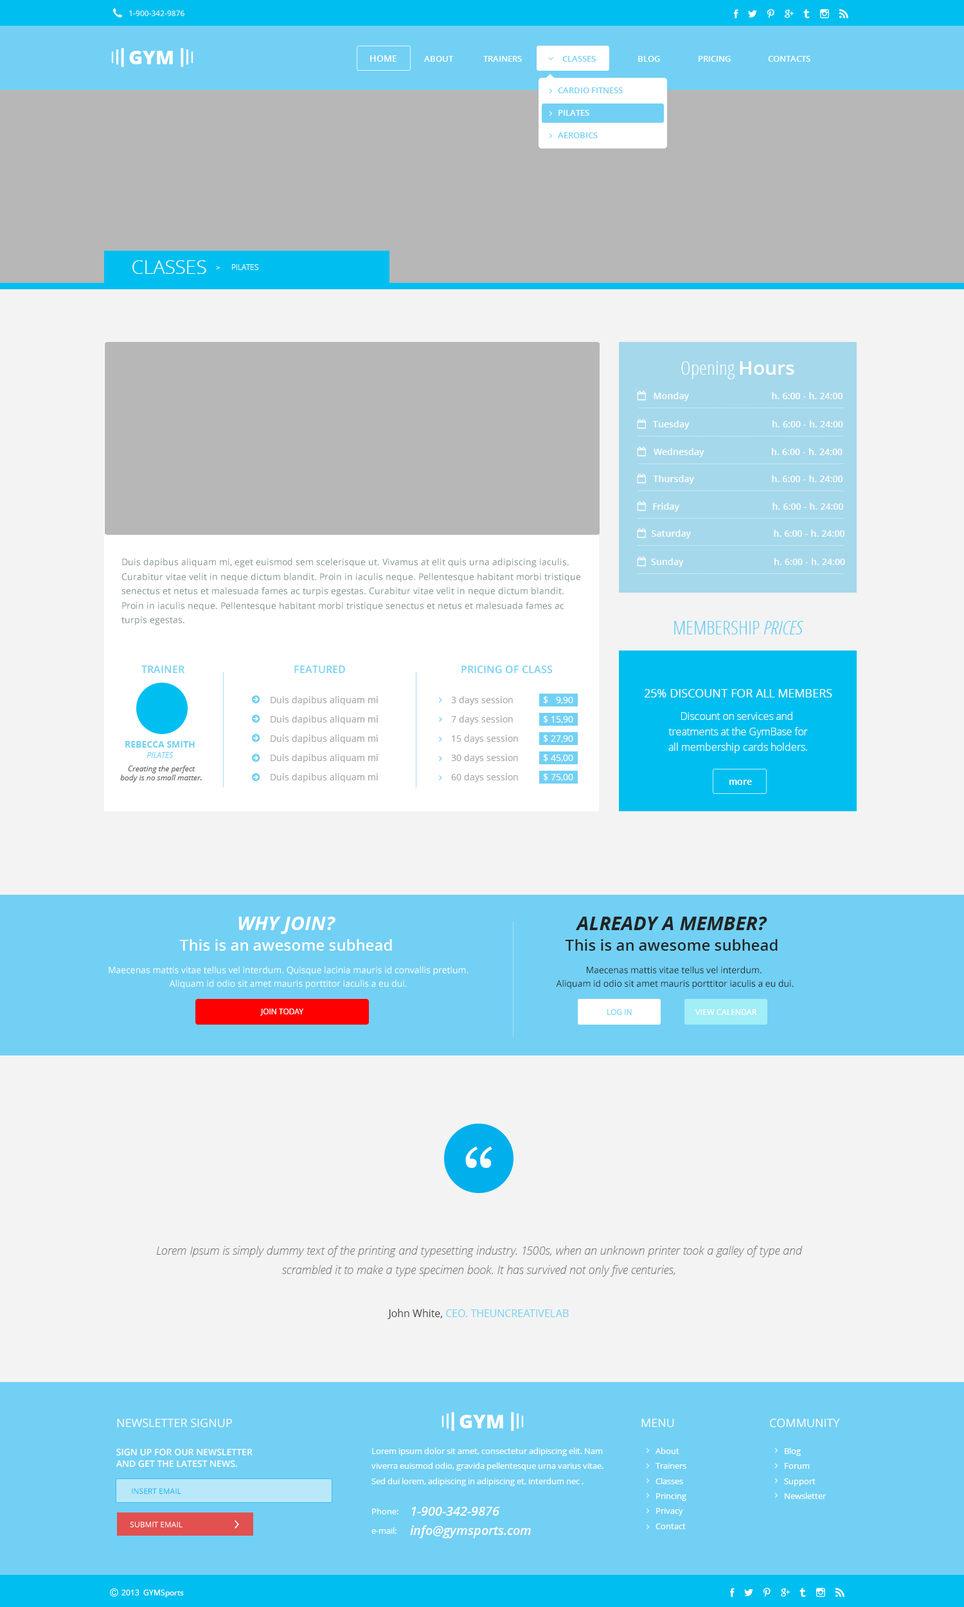
<style>
.page{position:relative;width:964px;height:1607px;background:#f3f3f3}
.page>*{position:absolute;margin:0}
.t1{font:7.7px "OpenSans";color:#ffffff;text-transform:uppercase}
.t2{font:9px "OpenSans-Semibold";color:#ffffff}
.t3{font:8.4px "OpenSans-Semibold";color:#ffffff}
.t4{font:8.4px "OpenSans-Semibold";color:#72d0f4}
.t5{font:19.3px "OpenSans-Light";color:#feffff}
.t6{font:7.1px "OpenSans-Light"}
.t7{font:7.7px "OpenSans-Light";color:#ffffff}
.t8{font:19.3px "OpenSans-CondensedLight";color:#ffffff}
.t9{font:19.3px "OpenSans-Semibold";color:#ffffff}
.t10{font:9px/14.4px "OpenSans";color:#7f8c8c}
.t11{font:19.3px "OpenSans-CondensedLight";color:#57cbf4;text-transform:uppercase}
.t12{font:19.3px "OpenSans-CondensedLightItalic";color:#57cbf4;text-transform:uppercase}
.t13{font:10.3px "OpenSans-Semibold";color:#72d0f4}
.t14{font:10.3px "OpenSans-Semibold";color:#72d0f4;text-transform:uppercase}
.t15{font:11.6px "OpenSans";color:#ffffff;text-transform:uppercase}
.t16{font:9px/19.3px "OpenSans";color:#a6a6a6}
.t17{font:10.3px/15.4px "OpenSans-Light";color:#ffffff}
.t18{font:9px "OpenSans-Bold";color:#72d0f4;text-transform:uppercase}
.t19{font:7.7px "OpenSans-Italic";color:#72d0f4;text-transform:uppercase}
.t20{font:7.7px "OpenSans-Italic";color:#606060}
.t21{font:19.3px "OpenSans-BoldItalic";color:#ffffff}
.t22{font:19.3px "OpenSans-BoldItalic";color:#222222}
.t23{font:15.4px "OpenSans-Semibold";color:#ffffff}
.t24{font:15.4px "OpenSans-Semibold";color:#222222}
.t25{font:9px/13.5px "OpenSans";color:#ffffff}
.t26{font:9px/13.5px "OpenSans";color:#222222}
.t27{font:7.7px "OpenSans";color:#72d0f4;text-transform:uppercase}
.t28{font:7.7px "OpenSans-Semibold";color:#ffffff;text-transform:uppercase}
.t29{font:80.4px "Georgia";color:#ffffff}
.t30{font:11.6px/19.3px "OpenSansLight-Italic";color:#787c7f}
.t31{font:10.3px "OpenSans";color:#72d0f4}
.t32{font:10.3px "OpenSans";color:#414141}
.t33{font:9px/11.6px "OpenSans-Semibold";color:#ffffff;text-transform:uppercase}
.t34{font:8.4px/15px "OpenSans";color:#ffffff}
.t35{font:7.7px "OpenSans";color:#00afec;text-transform:uppercase}
.t36{font:8.4px "OpenSans";color:#ffffff}
.t37{font:12.9px "OpenSans-SemiboldItalic";color:#ffffff}
.t38{font:7.7px "OpenSans";color:#ffffff}
</style>
<div class="page">
<p class="t1" style="left:129px;top:10px;width:55px;height:6px">1-900-342-9876</p>
<p class="t2" style="left:370px;top:55px;width:27px;height:7px">HOME</p>
<p class="t3" style="left:424px;top:56px;width:30px;height:6px">ABOUT</p>
<p class="t3" style="left:483px;top:56px;width:39px;height:6px">TRAINERS</p>
<p class="t4" style="left:562px;top:56px;width:34px;height:6px">CLASSES</p>
<p class="t3" style="left:638px;top:56px;width:22px;height:6px">BLOG</p>
<p class="t3" style="left:699px;top:56px;width:32px;height:6px">PRICING</p>
<p class="t3" style="left:768px;top:56px;width:43px;height:6px">CONTACTS</p>
<p class="t4" style="left:558px;top:87px;width:65px;height:6px">CARDIO FITNESS</p>
<p class="t3" style="left:559px;top:110px;width:31px;height:6px">PILATES</p>
<p class="t4" style="left:558px;top:132px;width:40px;height:6px">AEROBICS</p>
<p class="t5" style="left:132px;top:260px;width:74px;height:14px">CLASSES</p>
<p class="t6" style="left:216px;top:266px;width:4px;height:3px">&gt;</p>
<p class="t7" style="left:232px;top:264px;width:26px;height:6px">PILATES</p>
<p class="t8" style="left:681px;top:361px;width:114px;height:18px">Opening <span class="t9">Hours</span></p>
<p class="t2" style="left:654px;top:392px;width:189px;height:9px">Monday                                h. 6:00 - h. 24:00</p>
<p class="t2" style="left:653px;top:420px;width:190px;height:9px">Tuesday                                h. 6:00 - h. 24:00</p>
<p class="t2" style="left:654px;top:448px;width:189px;height:9px">Wednesday                          h. 6:00 - h. 24:00</p>
<p class="t2" style="left:653px;top:475px;width:190px;height:9px">Thursday                              h. 6:00 - h. 24:00</p>
<p class="t2" style="left:653px;top:503px;width:190px;height:9px">Friday                                    h. 6:00 - h. 24:00</p>
<p class="t2" style="left:652px;top:530px;width:193px;height:9px">Saturday                                h. 6:00 - h. 24:00</p>
<p class="t10" style="left:122px;top:558px;width:458px;height:68px">Duis dapibus aliquam mi, eget euismod sem scelerisque ut. Vivamus at elit quis urna adipiscing iaculis. Curabitur vitae velit in neque dictum blandit. Proin in iaculis neque. Pellentesque habitant morbi tristique senectus et netus et malesuada fames ac turpis egestas. Curabitur vitae velit in neque dictum blandit. Proin in iaculis neque. Pellentesque habitant morbi tristique senectus et netus et malesuada fames ac turpis egestas.</p>
<p class="t2" style="left:651px;top:558px;width:194px;height:9px">Sunday                                   h. 6:00 - h. 24:00</p>
<p class="t11" style="left:674px;top:621px;width:130px;height:13px">Membership <span class="t12">Prices</span></p>
<p class="t13" style="left:141px;top:665px;width:43px;height:8px">TRAINER</p>
<p class="t13" style="left:294px;top:665px;width:51px;height:9px">FEATURED</p>
<p class="t14" style="left:462px;top:665px;width:90px;height:9px">Pricing of Class</p>
<p class="t15" style="left:645px;top:689px;width:188px;height:9px">25% discount for all members</p>
<p class="t16" style="left:271px;top:696px;width:107px;height:86px">Duis dapibus aliquam mi<br>Duis dapibus aliquam mi<br>Duis dapibus aliquam mi<br>Duis dapibus aliquam mi<br>Duis dapibus aliquam mi</p>
<p class="t16" style="left:451px;top:696px;width:67px;height:86px">3 days session<br>7 days session<br>15 days session<br>30 days session<br>60 days session</p>
<p class="t17" style="left:669px;top:712px;width:139px;height:41px;text-align:center">Discount on services and <br>treatments at the GymBase for<br>all membership cards holders.</p>
<p class="t18" style="left:125px;top:741px;width:70px;height:7px">REBECCA SMITH</p>
<p class="t19" style="left:147px;top:752px;width:27px;height:6px">PILATES</p>
<p class="t20" style="left:120px;top:766px;width:82px;height:16px;text-align:center">Creating the perfect body is no small matter.</p>
<p class="t2" style="left:730px;top:780px;width:22px;height:5px">more</p>
<p class="t21" style="left:239px;top:917px;width:97px;height:17px">WHY JOIN?</p>
<p class="t22" style="left:575px;top:917px;width:193px;height:13px">ALREADY A MEMBER?</p>
<p class="t23" style="left:179px;top:939px;width:213px;height:12px">This is an awesome subhead</p>
<p class="t24" style="left:565px;top:939px;width:213px;height:12px">This is an awesome subhead</p>
<p class="t25" style="left:109px;top:966px;width:360px;height:23px;text-align:center">Maecenas mattis vitae tellus vel interdum. Quisque lacinia mauris id convallis pretium. Aliquam id odio sit amet mauris porttitor iaculis a eu dui.</p>
<p class="t26" style="left:556px;top:966px;width:238px;height:23px;text-align:center">Maecenas mattis vitae tellus vel interdum. <br> Aliquam id odio sit amet mauris porttitor iaculis a eu dui.</p>
<p class="t1" style="left:260px;top:1009px;width:43px;height:7px">JOiN TODAY</p>
<p class="t27" style="left:608px;top:1009px;width:24px;height:6px">LOG IN</p>
<p class="t28" style="left:696px;top:1009px;width:61px;height:6px">View CALENDAR</p>
<p class="t29" style="left:465px;top:1146px;width:27px;height:22px">“</p>
<p class="t30" style="left:156px;top:1246px;width:647px;height:31px;text-align:center">Lorem Ipsum is simply dummy text of the printing and typesetting industry. 1500s, when an unknown printer took a galley of type and scrambled it to make a type specimen book. It has survived not only five centuries,</p>
<p class="t31" style="left:388px;top:1309px;width:181px;height:10px"><span class="t32">John White, </span>CEO. THEUNCREATIVELAB</p>
<p class="t15" style="left:117px;top:1419px;width:115px;height:9px">NEWSLETTER SIGNUP</p>
<p class="t15" style="left:642px;top:1419px;width:32px;height:9px">MENU</p>
<p class="t15" style="left:770px;top:1419px;width:70px;height:9px">COMMUNITY</p>
<p class="t33" style="left:116px;top:1448px;width:137px;height:20px">Sign up for our newsletter <br>and get the latest news.</p>
<p class="t34" style="left:372px;top:1448px;width:232px;height:38px">Lorem ipsum dolor sit amet, consectetur adipiscing elit. Nam viverra euismod odio, gravida pellentesque urna varius vitae. Sed dui lorem, adipiscing in adipiscing et, interdum nec .</p>
<p class="t34" style="left:656px;top:1448px;width:31px;height:81px">About<br>Trainers<br>Classes<br>Princing<br>Privacy<br>Contact</p>
<p class="t34" style="left:784px;top:1448px;width:43px;height:51px">Blog<br>Forum<br>Support<br>Newsletter</p>
<p class="t35" style="left:132px;top:1488px;width:49px;height:6px">insert email</p>
<p class="t36" style="left:372px;top:1508px;width:27px;height:7px">Phone:</p>
<p class="t37" style="left:411px;top:1507px;width:89px;height:9px">1-900-342-9876</p>
<p class="t1" style="left:130px;top:1522px;width:53px;height:5px">Submit email</p>
<p class="t36" style="left:372px;top:1527px;width:25px;height:7px">e-mail:</p>
<p class="t37" style="left:410px;top:1526px;width:121px;height:12px">info@gymsports.com</p>
<p class="t38" style="left:122px;top:1590px;width:62px;height:8px">2013  GYMSports</p>
</div>
